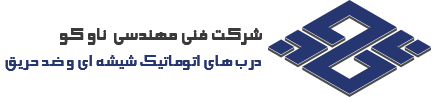
<style>
.page{position:relative;width:440px;height:97px;background:#ffffff}
.page>*{position:absolute;margin:0}
.t1{font:22px "LMUElham";color:#3b393c}
.t2{font:20px "LMUElham";color:#253671}
</style>
<div class="page">
<p class="t1" style="left:60px;top:28px;width:202px;height:17px">شرکت فنی مهندسی  ناو کو</p>
<p class="t2" style="left:5px;top:55px;width:256px;height:16px">درب های اتوماتیک شیشه ای و ضد حریق</p>
</div>
